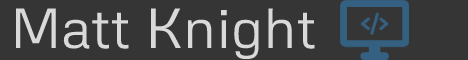
<style>
.page{position:relative;width:468px;height:60px;background:#353535}
.page>*{position:absolute;margin:0}
.t1{font:56px "Metrophobic-Regular";color:#d9d9d9}
</style>
<div class="page">
<p class="t1" style="left:16px;top:8px;width:299px;height:52px">Matt Knight</p>
</div>
